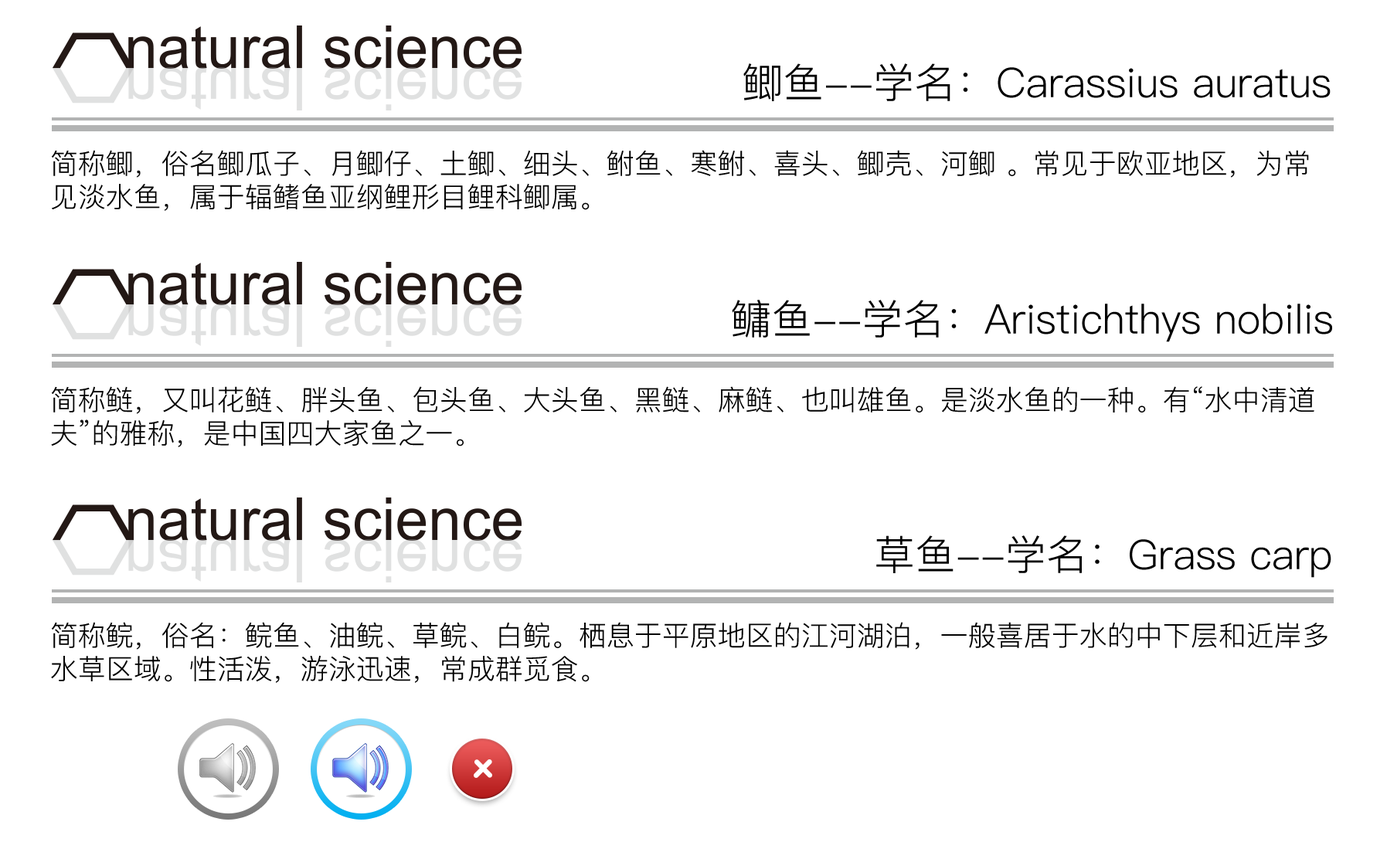
<style>
.page{position:relative;width:1387px;height:859px;background:#ffffff}
.page>*{position:absolute;margin:0}
.t1{font:40.9px "PingFangSC-Light";color:#000000}
.t2{font:27.8px "PingFangSC-Light";color:#000000}
</style>
<div class="page">
<p class="t1" style="left:744px;top:63px;width:587px;height:38px">鲫鱼--学名：Carassius auratus</p>
<p class="t2" style="left:51px;top:150px;width:1258px;height:61px">简称鲫，俗名鲫瓜子、月鲫仔、土鲫、细头、鲋鱼、寒鲋、喜头、鲫壳、河鲫 。常见于欧亚地区，为常见淡水鱼，属于辐鳍鱼亚纲鲤形目鲤科鲫属。</p>
<p class="t1" style="left:732px;top:300px;width:601px;height:42px">鳙鱼--学名：Aristichthys nobilis</p>
<p class="t2" style="left:51px;top:386px;width:1264px;height:62px">简称鲢，又叫花鲢、胖头鱼、包头鱼、大头鱼、黑鲢、麻鲢、也叫雄鱼。是淡水鱼的一种。有“水中清道夫”的雅称，是中国四大家鱼之一。</p>
<p class="t1" style="left:876px;top:536px;width:456px;height:42px">草鱼--学名：Grass carp</p>
<p class="t2" style="left:51px;top:622px;width:1277px;height:61px">简称鲩，俗名：鲩鱼、油鲩、草鲩、白鲩。栖息于平原地区的江河湖泊，一般喜居于水的中下层和近岸多水草区域。性活泼，游泳迅速，常成群觅食。</p>
</div>
